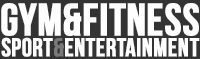
<style>
.page{position:relative;width:200px;height:59px;background:#fefefe}
.page>*{position:absolute;margin:0}
.t1{font:25.8px/21.7px "BebasNeue";color:#fefefe;font-weight:bold}
.t2{font:45.5px/21.7px "BebasNeue";color:#fefefe;font-weight:bold}
.t3{font:45.5px/21.7px "BebasNeue";letter-spacing:0.005em;color:#fefefe;font-weight:bold}
.t4{font:25.8px/21.7px "BebasNeue";color:#7a7979;font-weight:bold}
</style>
<div class="page">
<p class="t1" style="left:1px;top:3px;width:199px;height:54px;text-align:center"><span class="t2">GYM</span><span class="t3">&amp;</span><span class="t2">FITNESS<br></span>Sport<span class="t4">&amp;</span>ENTERTAINMENT</p>
</div>
